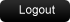
<style>
.page{position:relative;width:70px;height:22px}
.page>*{position:absolute;margin:0}
.t1{font:11.8px "ArialMT";color:#ffffff}
</style>
<div class="page">
<p class="t1" style="left:19px;top:5px;width:36px;height:11px">Logout</p>
</div>
